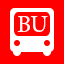
<style>
.page{position:relative;width:64px;height:64px;background:#ff0000}
.page>*{position:absolute;margin:0}
.t1{font:24px "MinionPro-Regular";color:#ffffff}
</style>
<div class="page">
<p class="t1" style="left:17px;top:16px;width:31px;height:16px">BU</p>
</div>
